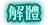
<style>
.page{position:relative;width:48px;height:25px}
.page>*{position:absolute;margin:0}
.t1{font:16px "RyuminPr6N-ExBold";color:#adfff2}
</style>
<div class="page">
<p class="t1" style="left:8px;top:5px;width:32px;height:16px">解體</p>
</div>
